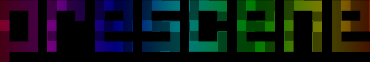
<style>
.page{position:relative;width:370px;height:62px;background:#000000}
.page>*{position:absolute;margin:0}
.t1{font:103.5px "HomespunTTBRK";scale:0.92 1}
</style>
<div class="page">
<p class="t1" style="left:0px;top:0px;width:370px;height:63px">prescene</p>
</div>
